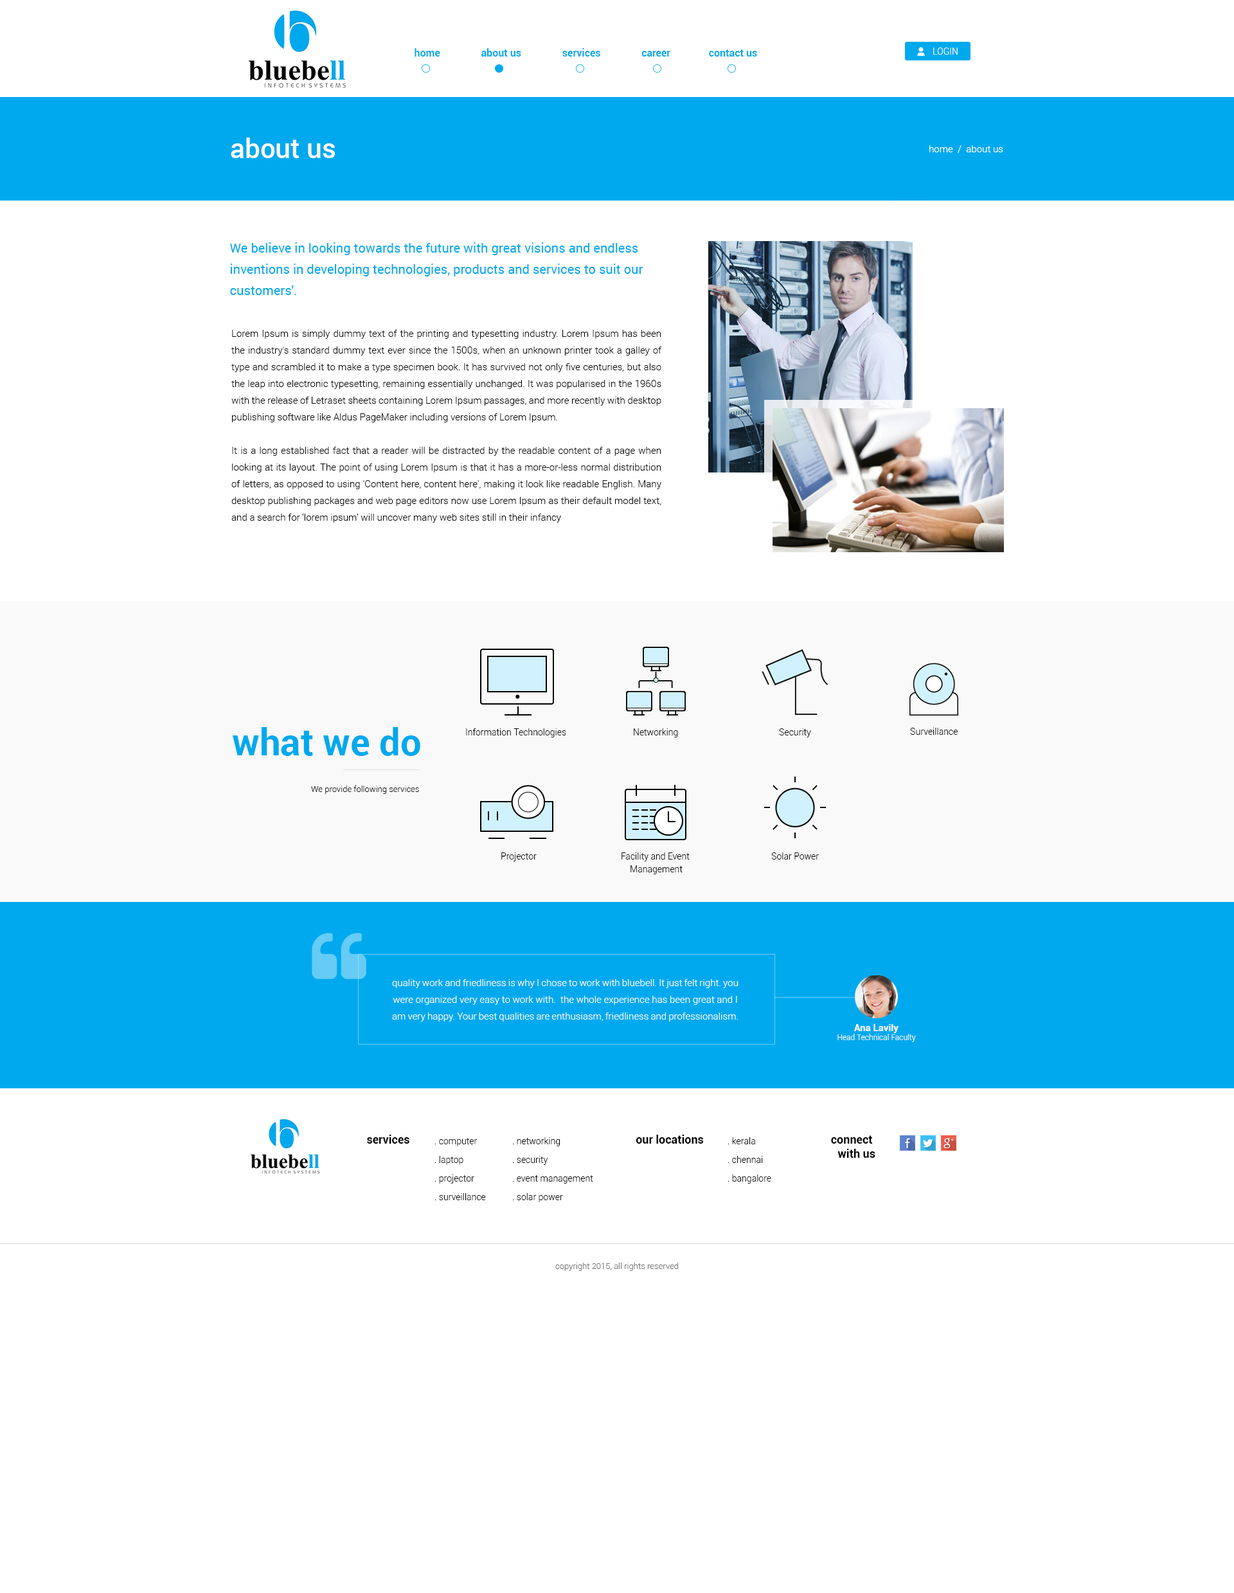
<style>
.page{position:relative;width:1234px;height:1593px;background:#ffffff}
.page>*{position:absolute;margin:0}
.t1{font:10.3px "Roboto-Bold";color:#00a9ee}
.t2{font:9px "Roboto-Light";color:#ffffff}
.t3{font:27px "Roboto-Medium";color:#ffffff}
.t4{font:9.6px "Roboto-Light";color:#ffffff}
.t5{font:12.9px/21.2px "Roboto-Regular";color:#00a9ee}
.t6{font:9.6px/16.7px "Roboto-Light";color:#000000}
.t7{font:37.3px "Roboto-Bold";color:#00a9ee}
.t8{font:9px "Roboto-Light";color:#000000}
.t9{font:8.4px "Roboto-Light";color:#000000}
.t10{font:9px/12.9px "Roboto-Light";color:#000000}
.t11{font:9.6px/16.7px "Roboto-Light";color:#ffffff}
.t12{font:7.7px/10.9px "Roboto-Light";color:#ffffff}
.t13{font:9.6px/10.9px "Roboto-Bold";color:#ffffff}
.t14{font:11.6px "Roboto-Bold";color:#000000}
.t15{font:9px/18.6px "Roboto-Light";color:#000000}
.t16{font:11.6px/14.1px "Roboto-Bold";color:#000000}
.t17{font:8.4px "Roboto-Light";color:#6c6c6c}
</style>
<div class="page">
<p class="t1" style="left:415px;top:48px;width:342px;height:9px">home                about us                services                career               contact us</p>
<p class="t2" style="left:933px;top:48px;width:25px;height:7px">LOGIN</p>
<p class="t3" style="left:231px;top:138px;width:104px;height:20px">about us</p>
<p class="t4" style="left:930px;top:145px;width:74px;height:8px">home  /  about us</p>
<p class="t5" style="left:230px;top:242px;width:414px;height:53px">We believe in looking towards the future with great visions and endless inventions in developing technologies, products and services to suit our customers'.</p>
<p class="t6" style="left:231px;top:330px;width:431px;height:193px;text-align:justify">Lorem Ipsum is simply dummy text of the printing and typesetting industry. Lorem Ipsum has been the industry's standard dummy text ever since the 1500s, when an unknown printer took a galley of type and scrambled it to make a type specimen book. It has survived not only five centuries, but also the leap into electronic typesetting, remaining essentially unchanged. It was popularised in the 1960s with the release of Letraset sheets containing Lorem Ipsum passages, and more recently with desktop publishing software like Aldus PageMaker including versions of Lorem Ipsum. <br><br>It is a long established fact that a reader will be distracted by the readable content of a page when looking at its layout. The point of using Lorem Ipsum is that it has a more-or-less normal distribution of letters, as opposed to using 'Content here, content here', making it look like readable English. Many desktop publishing packages and web page editors now use Lorem Ipsum as their default model text, and a search for 'lorem ipsum' will uncover many web sites still in their infancy</p>
<p class="t7" style="left:232px;top:727px;width:188px;height:29px">what we do</p>
<p class="t8" style="left:466px;top:728px;width:100px;height:9px">Information Technologies</p>
<p class="t8" style="left:634px;top:728px;width:44px;height:9px">Networking</p>
<p class="t8" style="left:779px;top:728px;width:32px;height:9px">Security</p>
<p class="t8" style="left:910px;top:728px;width:48px;height:7px">Surveillance</p>
<p class="t9" style="left:311px;top:786px;width:108px;height:8px">We provide following services</p>
<p class="t8" style="left:501px;top:852px;width:36px;height:9px">Projector</p>
<p class="t10" style="left:622px;top:852px;width:68px;height:22px;text-align:center">Facility and Event <br>Management</p>
<p class="t8" style="left:771px;top:852px;width:48px;height:8px">Solar Power</p>
<p class="t11" style="left:392px;top:979px;width:347px;height:43px;text-align:center">quality work and friedliness is why I chose to work with bluebell. It just felt right. you were organized very easy to work with.  the whole experience has been great and I am very happy. Your best qualities are enthusiasm, friedliness and professionalism.</p>
<p class="t12" style="left:838px;top:1024px;width:78px;height:18px;text-align:center"><span class="t13">Ana Lavily<br></span>Head Technical Faculty</p>
<p class="t14" style="left:367px;top:1135px;width:43px;height:9px">services</p>
<p class="t15" style="left:435px;top:1138px;width:51px;height:62px">. computer<br>. laptop<br>. projector<br>. surveillance</p>
<p class="t15" style="left:513px;top:1137px;width:80px;height:65px">. networking<br>. security<br>. event management<br>. solar power</p>
<p class="t14" style="left:636px;top:1135px;width:68px;height:9px">our locations</p>
<p class="t15" style="left:728px;top:1137px;width:43px;height:47px">. kerala<br>. chennai<br>. bangalore</p>
<p class="t16" style="left:831px;top:1135px;width:45px;height:23px;text-align:right">connect <br>with us</p>
<p class="t17" style="left:555px;top:1263px;width:124px;height:8px">copyright 2015, all rights reserved</p>
</div>
